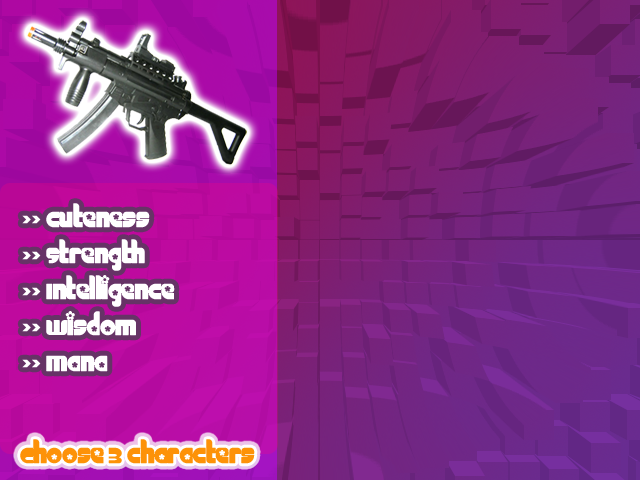
<style>
.page{position:relative;width:640px;height:480px}
.page>*{position:absolute;margin:0}
.t1{font:30px "Chick";color:#ffffff}
.t2{font:30px "Chick";color:#fd9208}
</style>
<div class="page">
<p class="t1" style="left:22px;top:203px;width:153px;height:169px">&gt;&gt; cuteness<br>&gt;&gt; Strength<br>&gt;&gt; Intelligence<br>&gt;&gt; Wisdom<br>&gt;&gt; Mana</p>
<p class="t2" style="left:20px;top:439px;width:235px;height:25px">Choose 3 characters</p>
</div>
